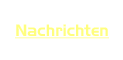
<style>
.page{position:relative;width:123px;height:60px;background:#ffffff}
.page>*{position:absolute;margin:0}
.t1{font:16px "AeroRegularSWFTE";color:#fffe7e;text-decoration:underline}
</style>
<div class="page">
<p class="t1" style="left:15px;top:24px;width:94px;height:15px">Nachrichten</p>
</div>
